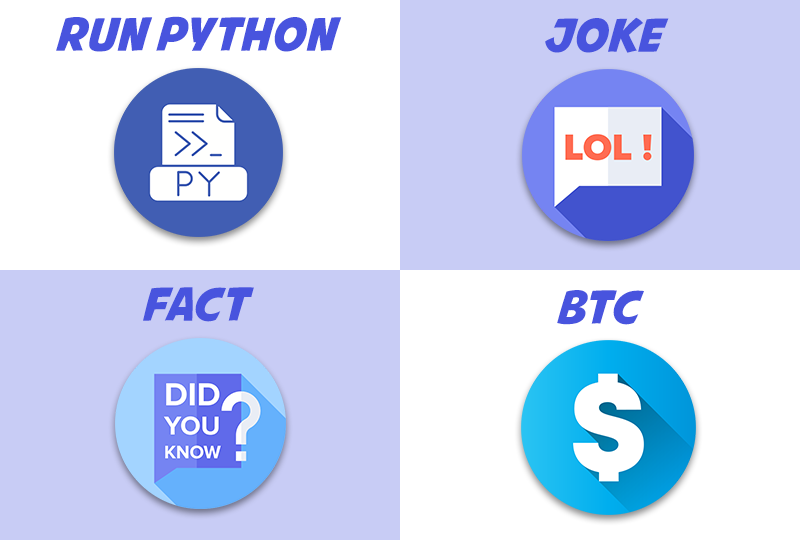
<style>
.page{position:relative;width:800px;height:540px;background:#ffffff}
.page>*{position:absolute;margin:0}
.t1{font:45.8px "AvengeanceMightiestAvenger";color:#4854de;text-transform:uppercase}
</style>
<div class="page">
<p class="t1" style="left:56px;top:16px;width:286px;height:36px">Run Python</p>
<p class="t1" style="left:545px;top:17px;width:124px;height:36px">Joke</p>
<p class="t1" style="left:143px;top:287px;width:111px;height:35px">Fact</p>
<p class="t1" style="left:557px;top:290px;width:87px;height:35px">BTC</p>
</div>
